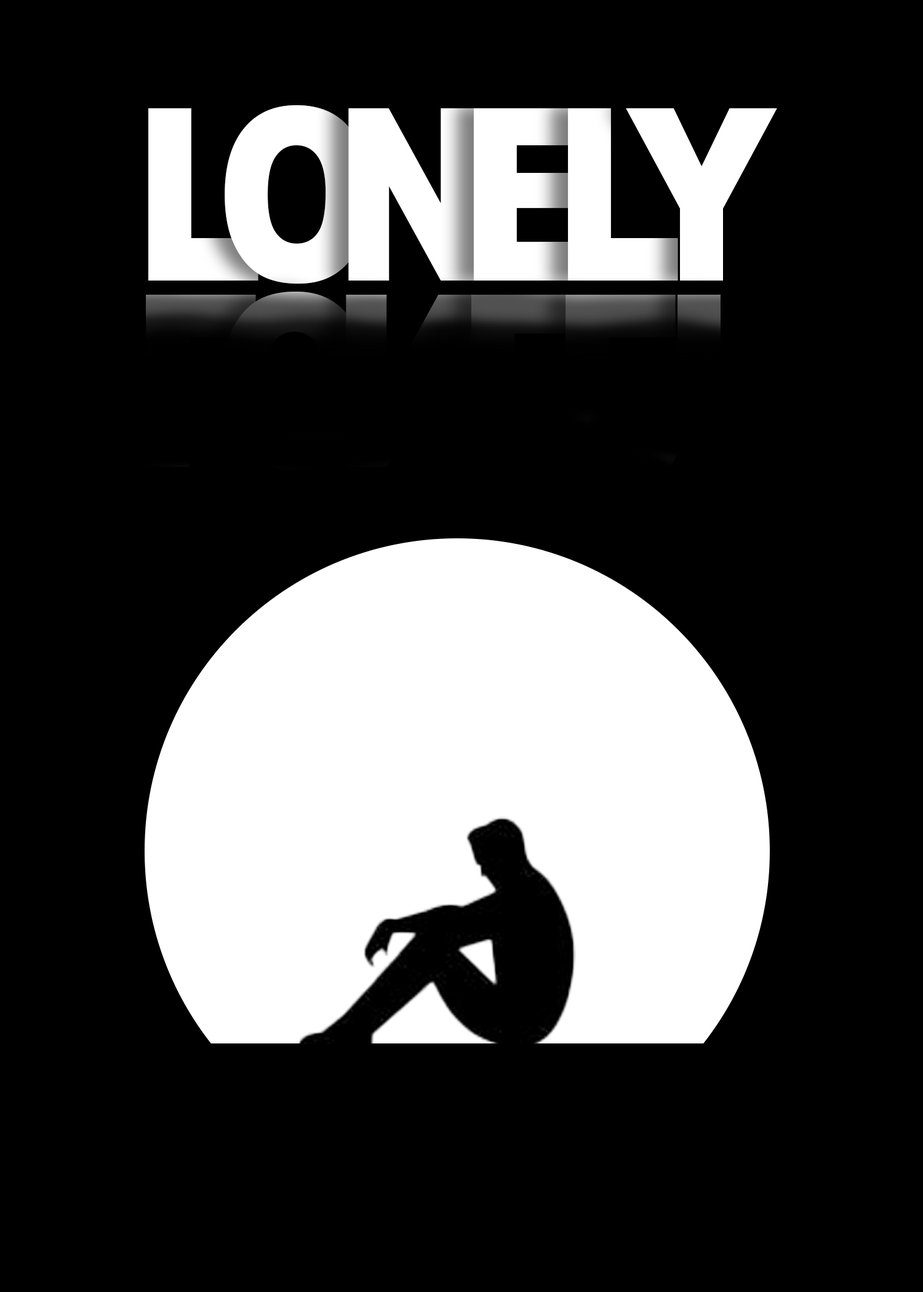
<style>
.page{position:relative;width:923px;height:1292px;background:#000000}
.page>*{position:absolute;margin:0}
.t1{font:240.3px "Arial-Black";color:#ffffff;scale:0.81 1}
.t2{font:240.3px "Arial-Black";scale:0.81 1}
</style>
<div class="page">
<p class="t1" style="left:148px;top:108px;width:110px;height:173px">L</p>
<p class="t1" style="left:225px;top:105px;width:144px;height:179px">O</p>
<p class="t1" style="left:348px;top:108px;width:134px;height:173px">N</p>
<p class="t1" style="left:473px;top:108px;width:118px;height:173px">E</p>
<p class="t1" style="left:568px;top:108px;width:110px;height:173px">L</p>
<p class="t1" style="left:626px;top:108px;width:151px;height:173px">Y</p>
<p class="t2" style="left:146px;top:295px;width:110px;height:172px">L</p>
<p class="t2" style="left:565px;top:295px;width:111px;height:172px">L</p>
</div>
